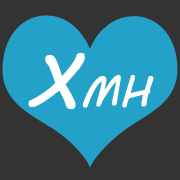
<style>
.page{position:relative;width:180px;height:180px;background:#333333}
.page>*{position:absolute;margin:0}
.t1{font:41px "MVBoli";color:#ffffff;font-weight:bold}
.t2{font:70.8px "MVBoli";color:#ffffff;font-weight:bold}
</style>
<div class="page">
<p class="t1" style="left:28px;top:53px;width:126px;height:56px"><span class="t2">X</span>MH</p>
</div>
